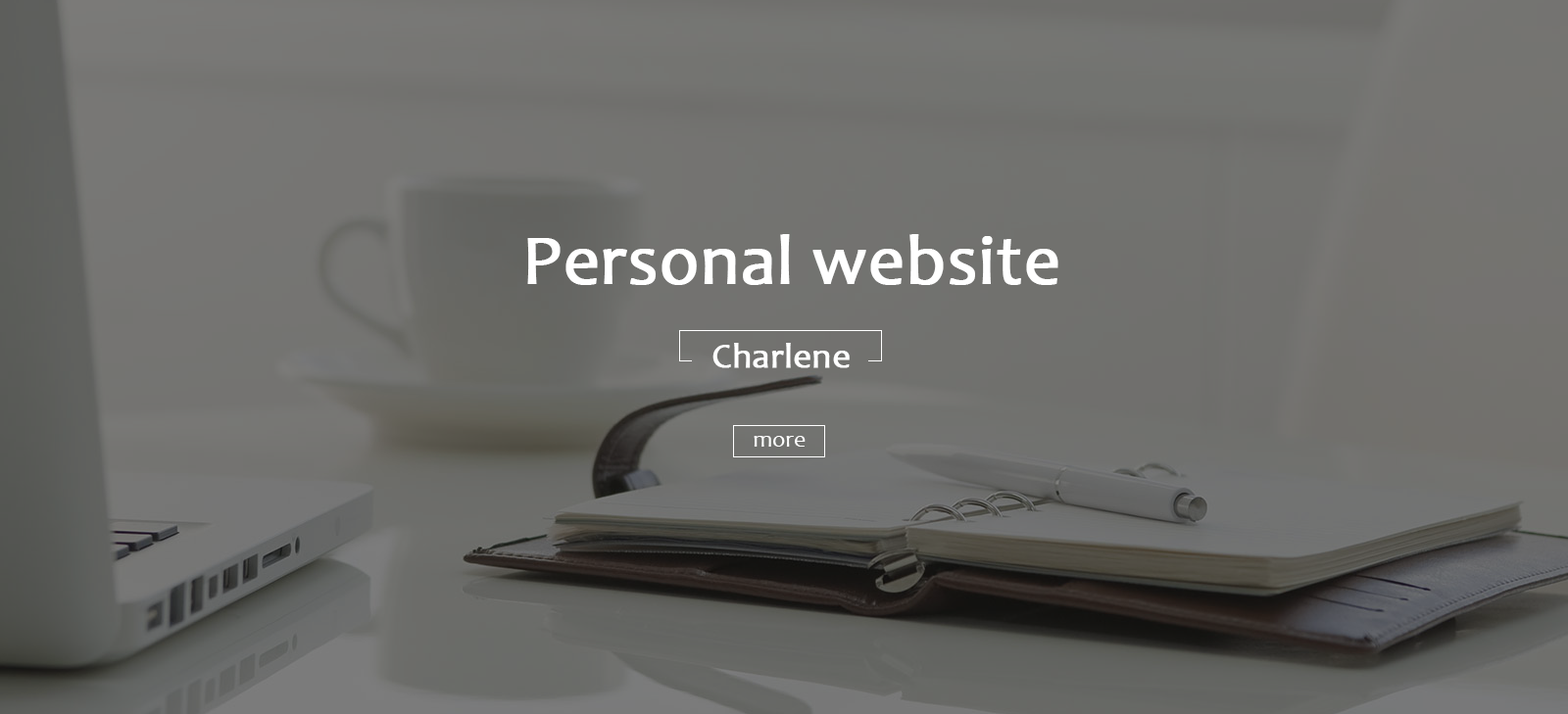
<style>
.page{position:relative;width:1568px;height:714px}
.page>*{position:absolute;margin:0}
.t1{font:70.6px "Candara";color:#ffffff;font-weight:bold}
.t2{font:35.3px "Candara";color:#ffffff;font-weight:bold}
.t3{font:23.5px "Candara";color:#ffffff}
</style>
<div class="page">
<p class="t1" style="left:527px;top:234px;width:531px;height:51px">Personal website</p>
<p class="t2" style="left:712px;top:343px;width:138px;height:25px">Charlene</p>
<p class="t3" style="left:754px;top:436px;width:52px;height:11px">more</p>
</div>
